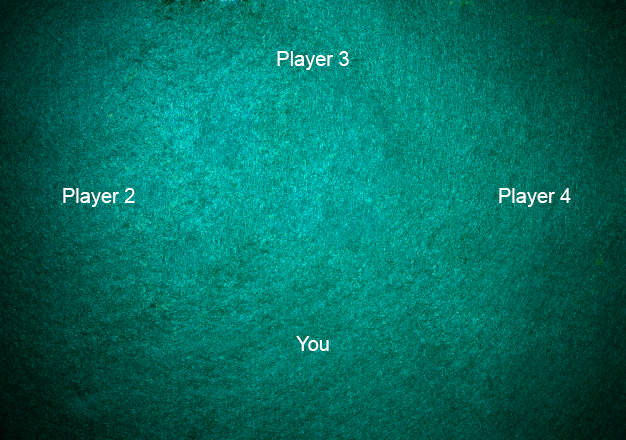
<style>
.page{position:relative;width:626px;height:440px}
.page>*{position:absolute;margin:0}
.t1{font:20px "ArialMT";color:#ffffff}
</style>
<div class="page">
<p class="t1" style="left:277px;top:51px;width:72px;height:19px">Player 3</p>
<p class="t1" style="left:63px;top:188px;width:72px;height:19px">Player 2</p>
<p class="t1" style="left:499px;top:188px;width:72px;height:19px">Player 4</p>
<p class="t1" style="left:296px;top:336px;width:33px;height:15px">You</p>
</div>
